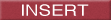
<style>
.page{position:relative;width:111px;height:20px}
.page>*{position:absolute;margin:0}
.t1{font:15.7px "Helvetica";color:#ffffff;scale:1.2 1}
</style>
<div class="page">
<p class="t1" style="left:22px;top:4px;width:67px;height:12px">INSERT</p>
</div>
